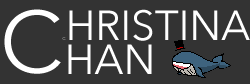
<style>
.page{position:relative;width:250px;height:84px;background:#333333}
.page>*{position:absolute;margin:0}
.t1{font:86.5px "AvenirNext-Regular";color:#ffffff}
.t2{font:41.7px "AvenirNext-Regular";color:#ffffff}
.t3{font:4.2px "AvenirNext-Regular";color:#ffffff}
</style>
<div class="page">
<p class="t1" style="left:4px;top:9px;width:57px;height:65px">C</p>
<p class="t2" style="left:62px;top:9px;width:188px;height:32px"><span class="t3">C</span>HRISTINA</p>
<p class="t2" style="left:68px;top:44px;width:84px;height:30px">HAN</p>
</div>
